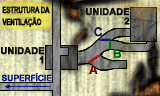
<style>
.page{position:relative;width:160px;height:96px}
.page>*{position:absolute;margin:0}
.t1{font:8.6px/12px "Arial-BoldMT";letter-spacing:-0.04em;font-weight:bold;scale:0.71 1}
.t2{font:9.3px/9.3px "Arial-BoldMT";color:#000000;font-weight:bold}
.t3{font:8.5px "Arial-BoldMT";letter-spacing:-0.04em;color:#00106b;font-weight:bold}
</style>
<div class="page">
<p class="t1" style="left:2px;top:6px;width:48px;height:21px">ESTRUTURA DA<br>VENTILAÇÃO</p>
<p class="t2" style="left:86px;top:8px;width:44px;height:17px;text-align:right">UNIDADE<br>2</p>
<p class="t2" style="left:1px;top:47px;width:44px;height:17px;text-align:right">UNIDADE<br>1</p>
<p class="t3" style="left:1px;top:73px;width:51px;height:9px">SUPERFÍCIE</p>
</div>
